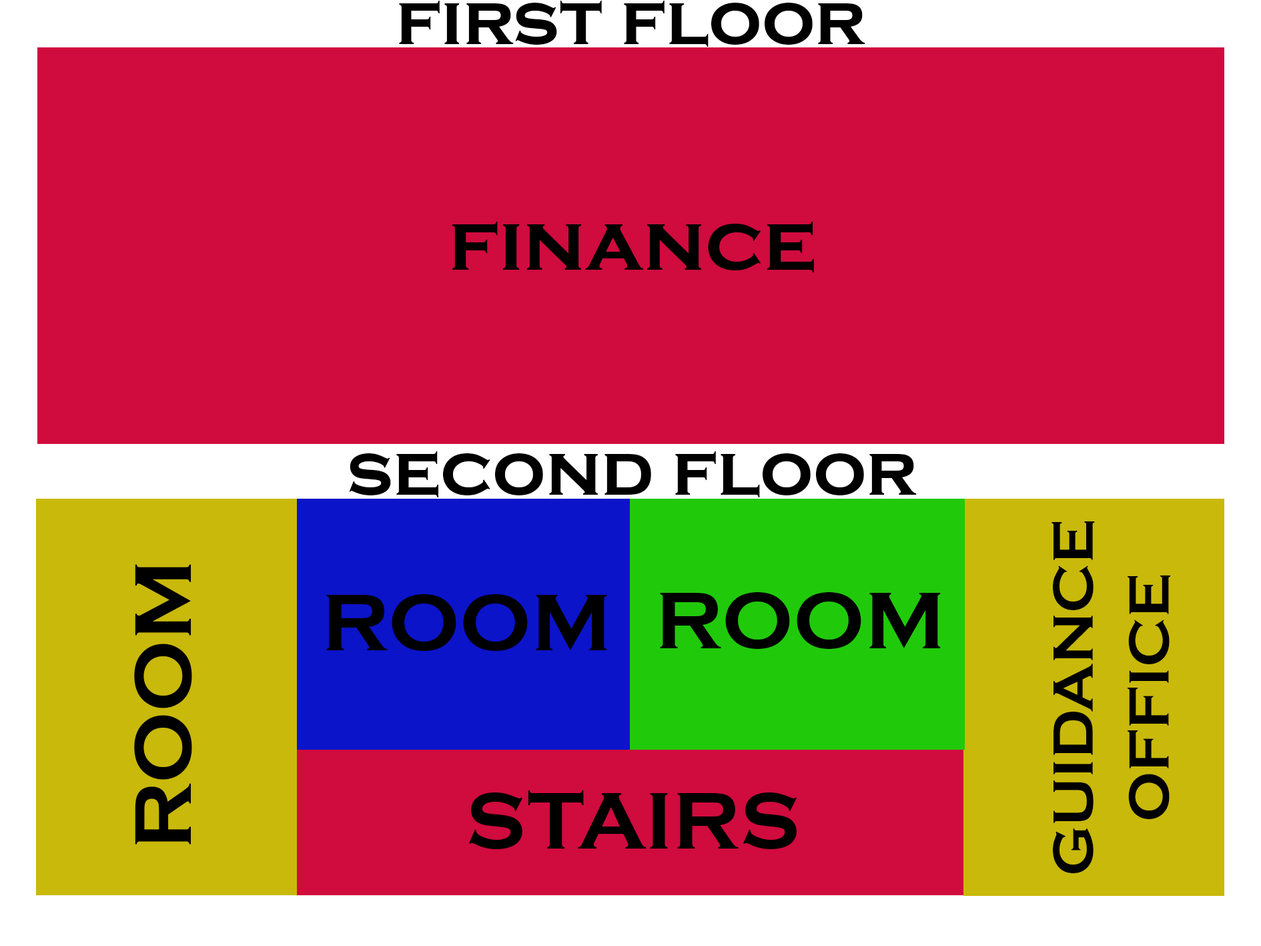
<style>
.page{position:relative;width:1261px;height:946px;background:#d00b3e}
.page>*{position:absolute;margin:0}
.t1{font:74.4px "CopperplateGothic-Bold";color:#000000}
.t2{font:83.4px "CopperplateGothic-Bold";color:#000000}
.t3{font:58.8px/75.8px "CopperplateGothic-Bold";color:#000000}
</style>
<div class="page">
<p class="t1" style="left:399px;top:1px;width:466px;height:46px">first floor</p>
<p class="t2" style="left:452px;top:222px;width:362px;height:50px">finance</p>
<p class="t1" style="left:349px;top:451px;width:568px;height:46px">second floor</p>
<p class="t3" style="left:1052px;top:521px;width:119px;height:352px;text-align:center;rotate:-90deg">GUIDANCE<br>OFFICE</p>
<p class="t2" style="left:134px;top:564px;width:58px;height:280px;rotate:-90deg">ROOM</p>
<p class="t2" style="left:326px;top:594px;width:281px;height:57px">ROOM</p>
<p class="t2" style="left:660px;top:592px;width:281px;height:57px">ROOM</p>
<p class="t2" style="left:468px;top:790px;width:329px;height:59px">STAIRS</p>
</div>
